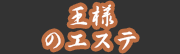
<style>
.page{position:relative;width:180px;height:54px;background:#333333}
.page>*{position:absolute;margin:0}
.t1{font:24.9px/24px "Gyoseki-Gyosho";color:#f6f8f8}
</style>
<div class="page">
<p class="t1" style="left:45px;top:4px;width:91px;height:46px;text-align:center">王様<br>のエステ</p>
</div>
